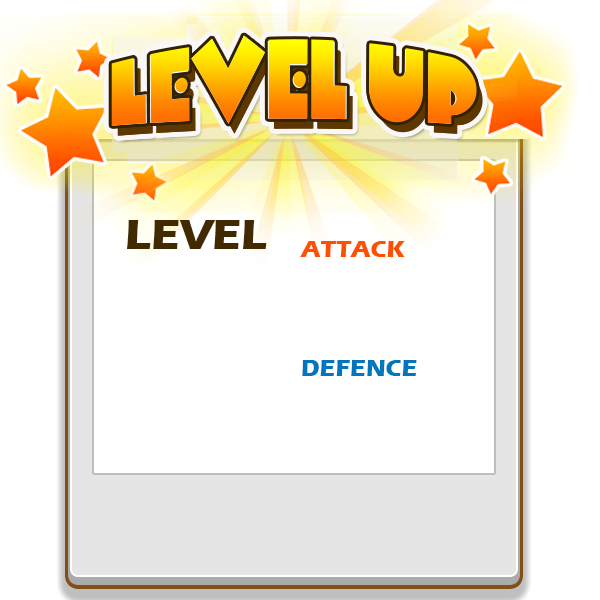
<style>
.page{position:relative;width:600px;height:600px;background:#ffffff}
.page>*{position:absolute;margin:0}
.t1{font:44.3px "ErasITC-Bold";color:#422a00}
.t2{font:24px "ErasITC-Bold";color:#ff5000}
.t3{font:24px "ErasITC-Bold";color:#0175be}
</style>
<div class="page">
<p class="t1" style="left:127px;top:220px;width:140px;height:29px">LEVEL</p>
<p class="t2" style="left:300px;top:241px;width:105px;height:16px">ATTACK</p>
<p class="t3" style="left:302px;top:360px;width:115px;height:16px">DEFENCE</p>
</div>
